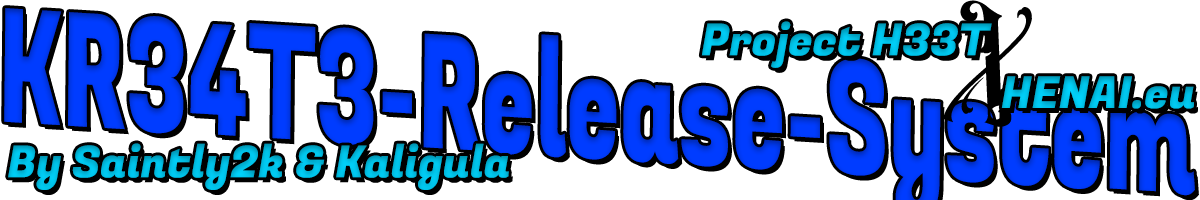
<style>
.page{position:relative;width:1200px;height:200px;background:#ffffff}
.page>*{position:absolute;margin:0}
.t1{font:194.5px "DemonBlade";color:#000000}
.t2{font:44px "FugazOne-Regular";color:#00bee4}
</style>
<div class="page">
<p class="t1" style="left:943px;top:0px;width:89px;height:127px;rotate:18deg">X</p>
<p class="t2" style="left:701px;top:21px;width:493px;height:88px;text-align:center">Project H33T<br>                                                HENAI.eu</p>
<p class="t2" style="left:8px;top:143px;width:501px;height:47px">By Saintly2k &amp; Kaligula</p>
</div>
